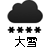
<style>
.page{position:relative;width:50px;height:48px;background:#ffffff}
.page>*{position:absolute;margin:0}
.t1{font:12px "OPPOSans-R";color:#000000}
</style>
<div class="page">
<p class="t1" style="left:15px;top:36px;width:22px;height:11px">大雪</p>
</div>
